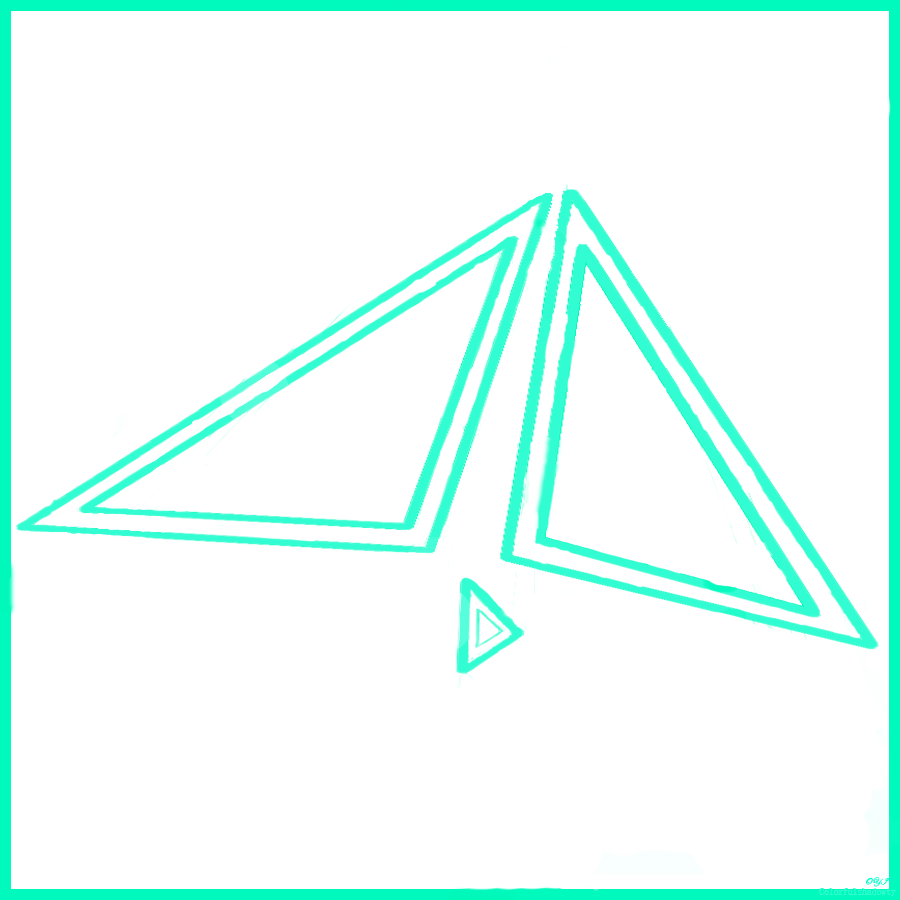
<style>
.page{position:relative;width:900px;height:900px;background:#ffffff}
.page>*{position:absolute;margin:0}
.t1{font:9.5px "EdwardianScriptITC";color:#00ffcc}
</style>
<div class="page">
<p class="t1" style="left:866px;top:877px;width:25px;height:10px">OYI</p>
</div>
